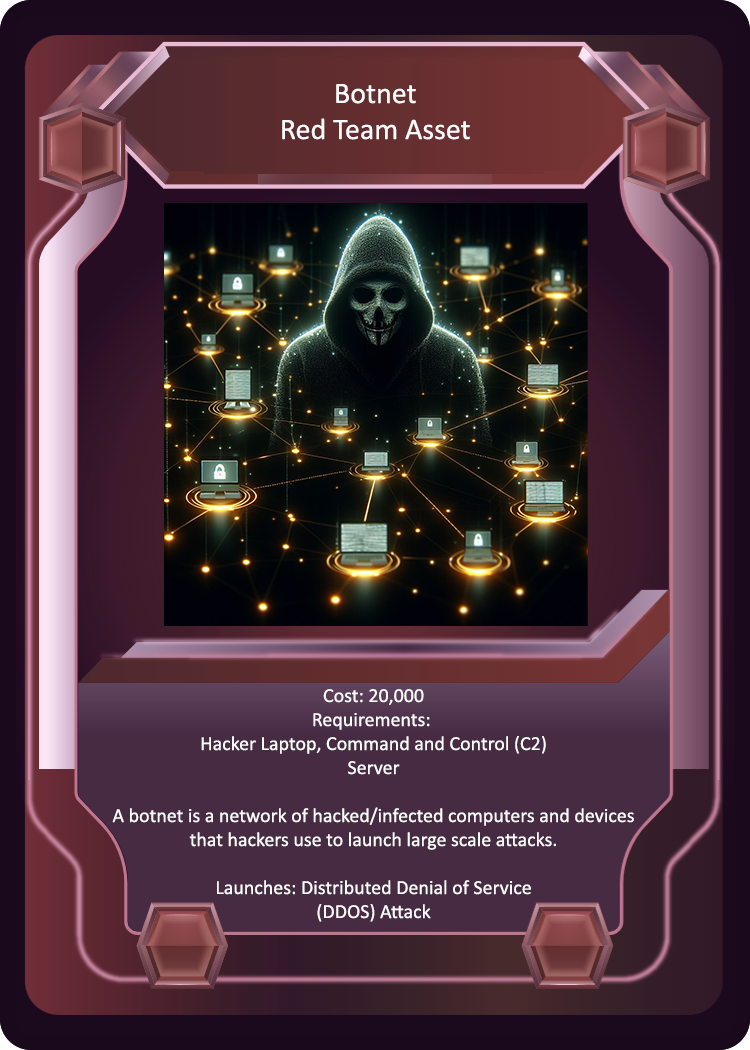
<style>
.page{position:relative;width:750px;height:1050px}
.page>*{position:absolute;margin:0}
.t1{font:30px "Calibri";color:#fcfbfb}
.t2{font:20px "Calibri";color:#fcfbfb}
</style>
<div class="page">
<p class="t1" style="left:282px;top:84px;width:188px;height:56px;text-align:center">Botnet<br>Red Team Asset</p>
<p class="t2" style="left:112px;top:689px;width:522px;height:233px;text-align:center">Cost: 20,000<br>Requirements: <br>Hacker Laptop, Command and Control (C2)<br>Server<br><br>A botnet is a network of hacked/infected computers and devices<br>that hackers use to launch large scale attacks.<br><br>Launches: Distributed Denial of Service<br>(DDOS) Attack</p>
</div>
